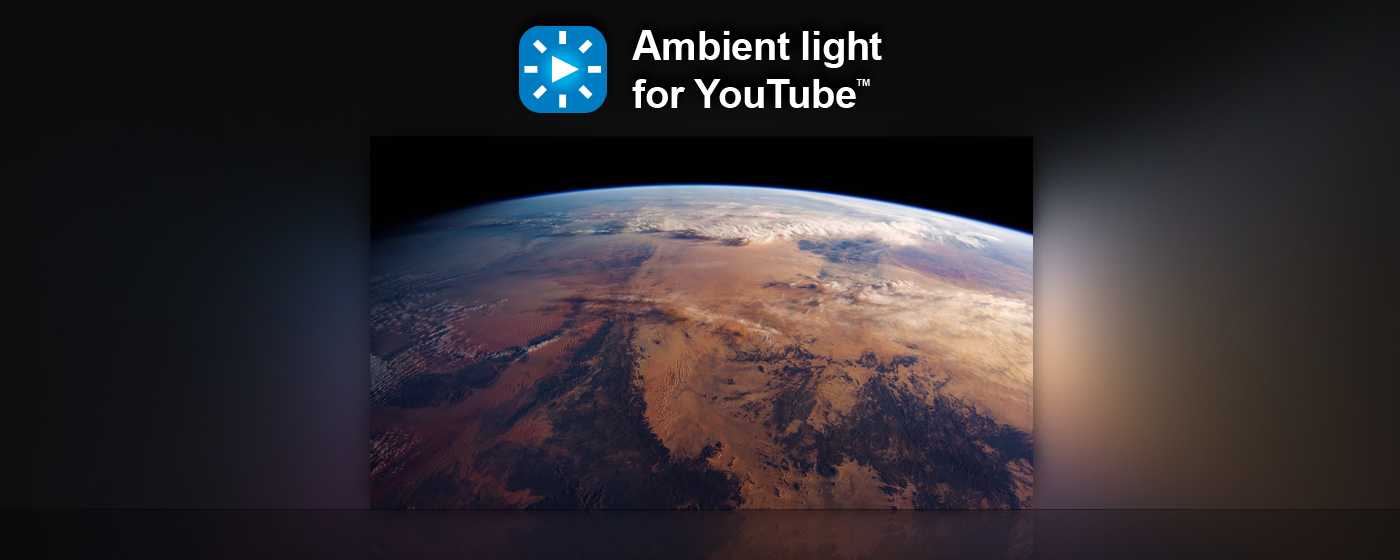
<style>
.page{position:relative;width:1400px;height:560px}
.page>*{position:absolute;margin:0}
.t1{font:40px/48px "Arial-BoldMT";letter-spacing:-0.007em;color:#ffffff}
.t2{font:40.7px/48px "Arial-BoldMT";letter-spacing:-0.007em;color:#ffffff}
.t3{font:40px/48px "Arial-BoldMT";letter-spacing:-0.051em;color:#ffffff}
.t4{font:16.5px/28px "Arial-BoldMT";color:#ffffff}
</style>
<div class="page">
<p class="t1" style="left:632px;top:30px;width:250px;height:78px"><span class="t2">A</span>mbient light<br>for YouTub<span class="t3">e</span><span class="t4">™</span></p>
</div>
